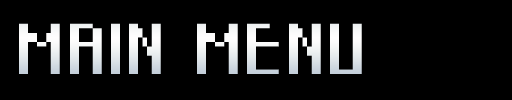
<style>
.page{position:relative;width:512px;height:100px;background:#000000}
.page>*{position:absolute;margin:0}
.t1{font:66.6px "Starcadia";color:#fffefe}
</style>
<div class="page">
<p class="t1" style="left:19px;top:23px;width:343px;height:51px">MAIN MENU</p>
</div>
